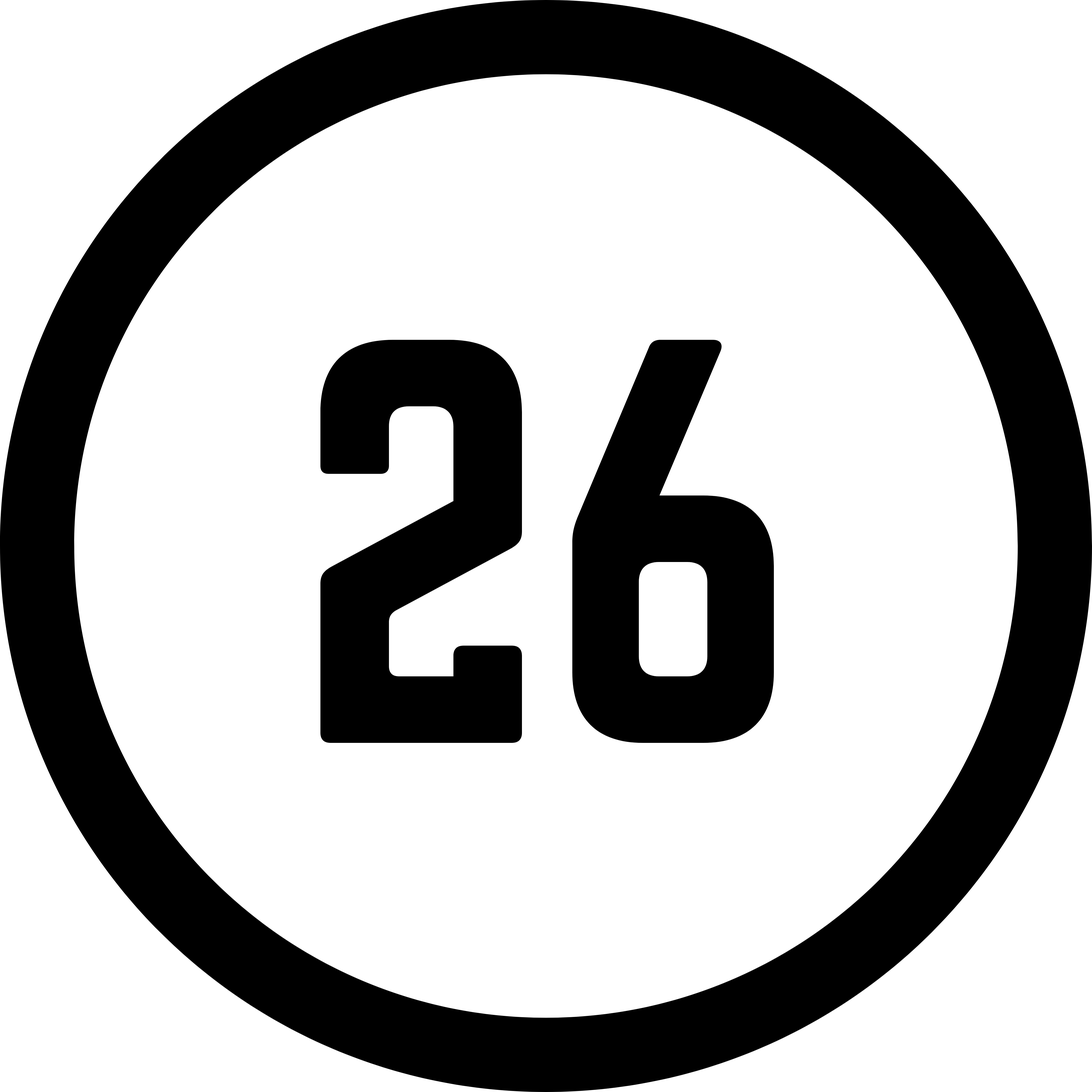
<style>
.page{position:relative;width:1092px;height:1092px;background:#ffffff}
.page>*{position:absolute;margin:0}
.t1{font:503.8px "Norwester-Regular";color:#000000}
</style>
<div class="page">
<p class="t1" style="left:320px;top:340px;width:454px;height:403px">26</p>
</div>
